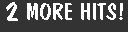
<style>
.page{position:relative;width:128px;height:32px;background:#333333}
.page>*{position:absolute;margin:0}
.t1{font:30px "DomCasualBT-Regular";color:#ffffff}
.t2{font:24px "DomCasualBT-Regular";color:#ffffff}
</style>
<div class="page">
<p class="t1" style="left:6px;top:2px;width:12px;height:19px">2</p>
<p class="t2" style="left:27px;top:3px;width:96px;height:17px">MORE HITS!</p>
</div>
